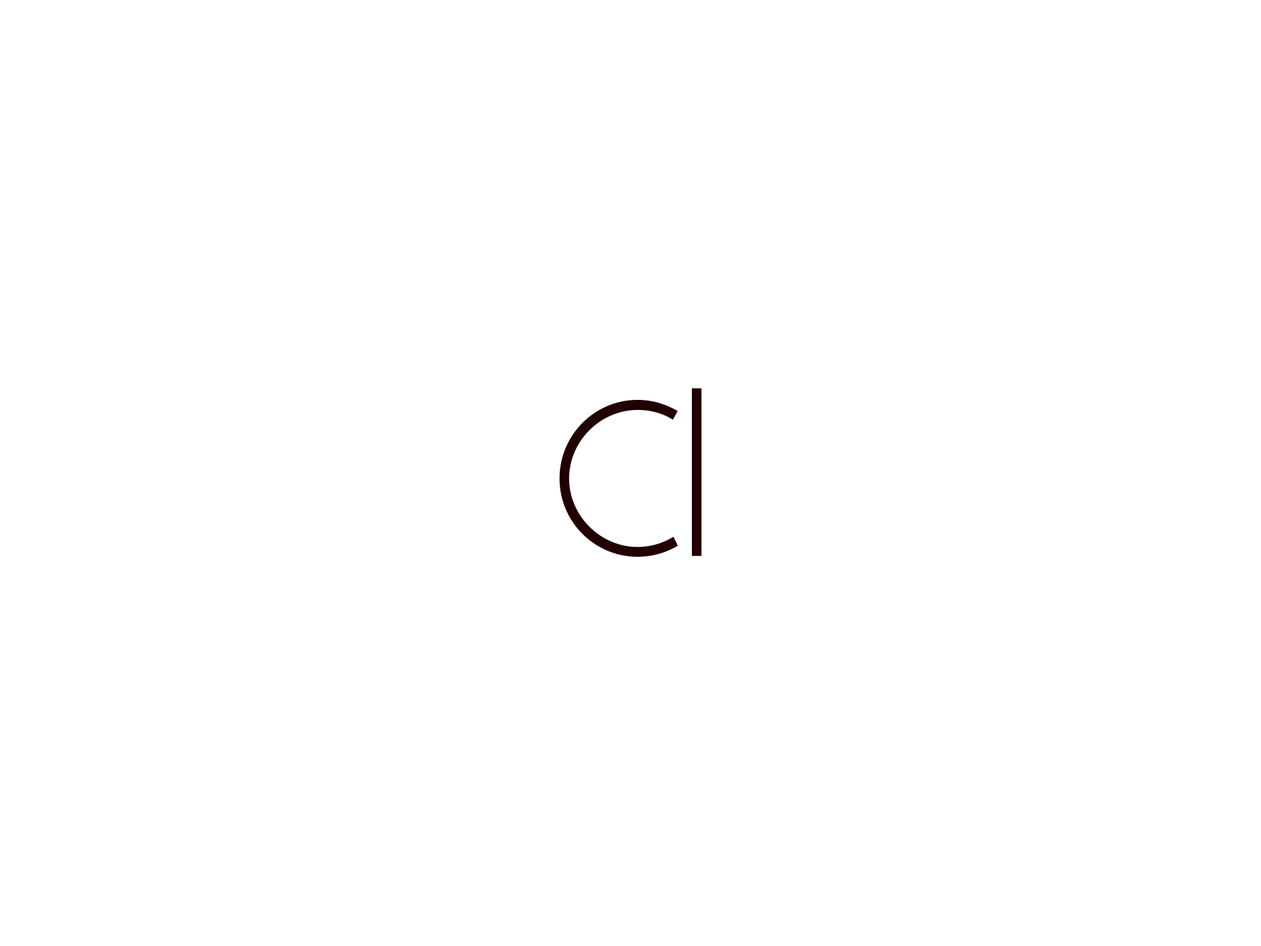
<style>
.page{position:relative;width:1261px;height:946px;background:#ffffff}
.page>*{position:absolute;margin:0}
.t1{font:222.4px "Alcubierre";color:#200000}
</style>
<div class="page">
<p class="t1" style="left:559px;top:388px;width:143px;height:169px">Cl</p>
</div>
